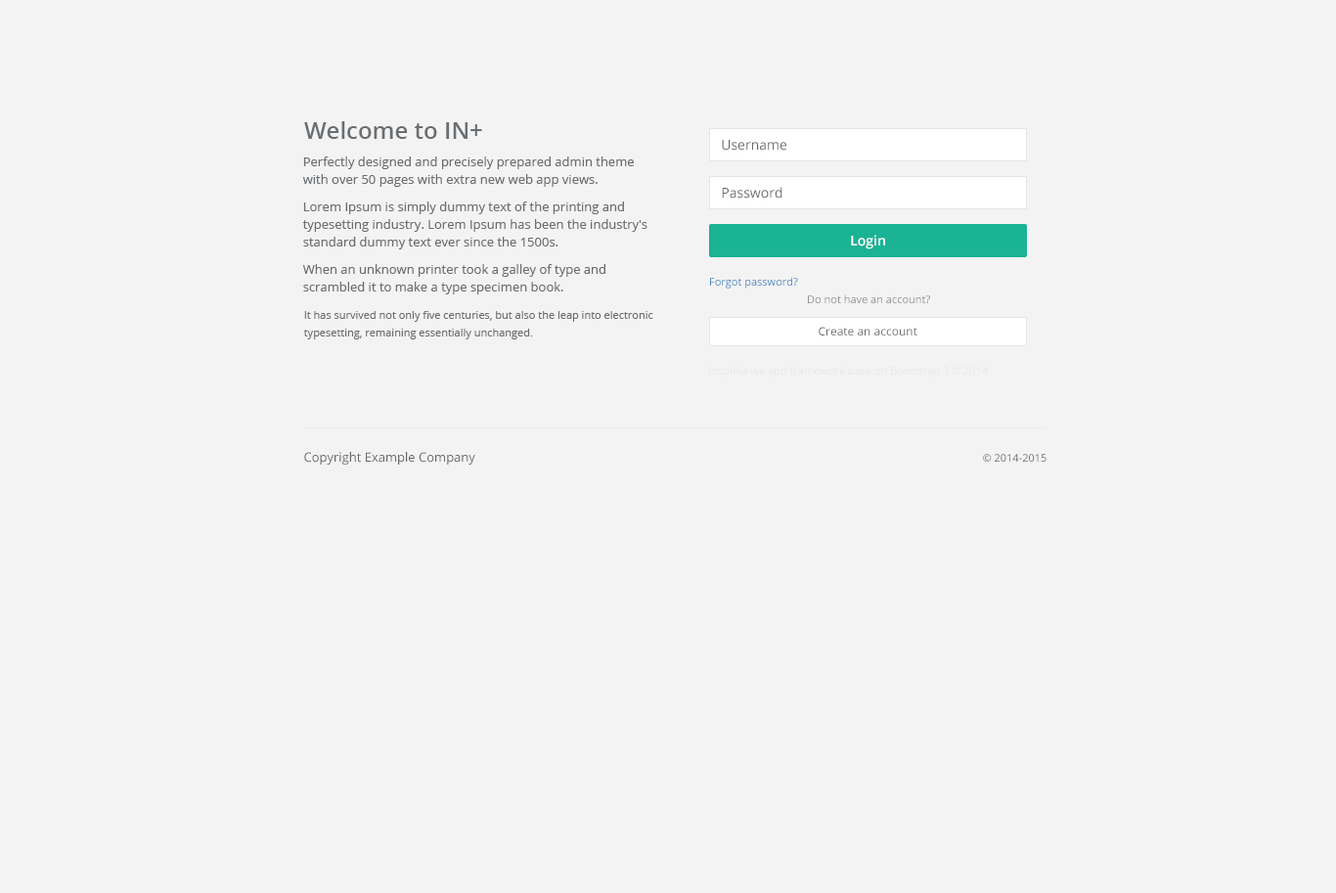
<style>
.page{position:relative;width:1336px;height:893px;background:#f3f3f4}
.page>*{position:absolute;margin:0}
.t1{font:23.5px "OpenSans-Semibold";color:#6b6e70}
.t2{font:13.7px "OpenSans";color:#676a6c}
.t3{font:12.7px/17.6px "OpenSans";color:#6b6e70}
.t4{font:13.7px "OpenSans-Semibold";color:#ffffff}
.t5{font:10.8px "OpenSans";color:#4988be}
.t6{font:10.8px "OpenSans";color:#909090}
.t7{font:10.8px/17.6px "OpenSans";color:#6b6e70}
.t8{font:11.7px "OpenSans";color:#676a6c}
.t9{font:10.8px "OpenSans";color:#e7e7e9}
.t10{font:12.7px "OpenSans";color:#676a6c}
.t11{font:10.8px "OpenSans";color:#676a6c}
</style>
<div class="page">
<p class="t1" style="left:304px;top:121px;width:178px;height:18px">Welcome to IN+</p>
<p class="t2" style="left:722px;top:140px;width:64px;height:11px">Username</p>
<p class="t3" style="left:302px;top:156px;width:345px;height:138px">Perfectly designed and precisely prepared admin theme with over 50 pages with extra new web app views.<br><br>Lorem Ipsum is simply dummy text of the printing and typesetting industry. Lorem Ipsum has been the industry's standard dummy text ever since the 1500s.<br><br>When an unknown printer took a galley of type and scrambled it to make a type specimen book.</p>
<p class="t2" style="left:722px;top:187px;width:60px;height:11px">Password</p>
<p class="t4" style="left:851px;top:235px;width:34px;height:14px">Login</p>
<p class="t5" style="left:710px;top:277px;width:88px;height:11px">Forgot password?</p>
<p class="t6" style="left:808px;top:294px;width:122px;height:9px">Do not have an account?</p>
<p class="t7" style="left:303px;top:311px;width:350px;height:28px">It has survived not only five centuries, but also the leap into electronic typesetting, remaining essentially unchanged.</p>
<p class="t8" style="left:818px;top:327px;width:99px;height:8px">Create an account</p>
<p class="t9" style="left:709px;top:366px;width:279px;height:11px">Inspinia we app framework base on Bootstrap 3 © 2014</p>
<p class="t10" style="left:304px;top:452px;width:171px;height:12px">Copyright Example Company</p>
<p class="t11" style="left:983px;top:454px;width:63px;height:8px">© 2014-2015</p>
</div>
